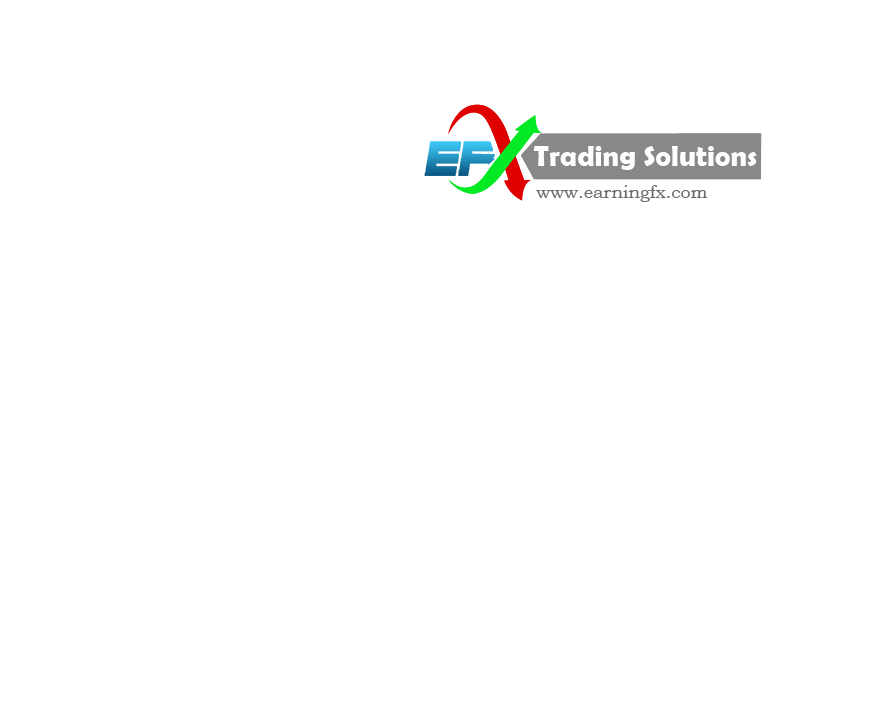
<style>
.page{position:relative;width:875px;height:712px;background:#ffffff}
.page>*{position:absolute;margin:0}
.t1{font:29.3px "BerlinSansFBDemi-Bold";color:#fffefe}
.t2{font:17.8px "BookmanOldStyle";color:#6d6b6b}
</style>
<div class="page">
<p class="t1" style="left:533px;top:146px;width:224px;height:24px">Trading Solutions</p>
<p class="t1" style="left:533px;top:146px;width:224px;height:24px">Trading Solutions</p>
<p class="t2" style="left:536px;top:185px;width:172px;height:17px">www.earningfx.com</p>
</div>
